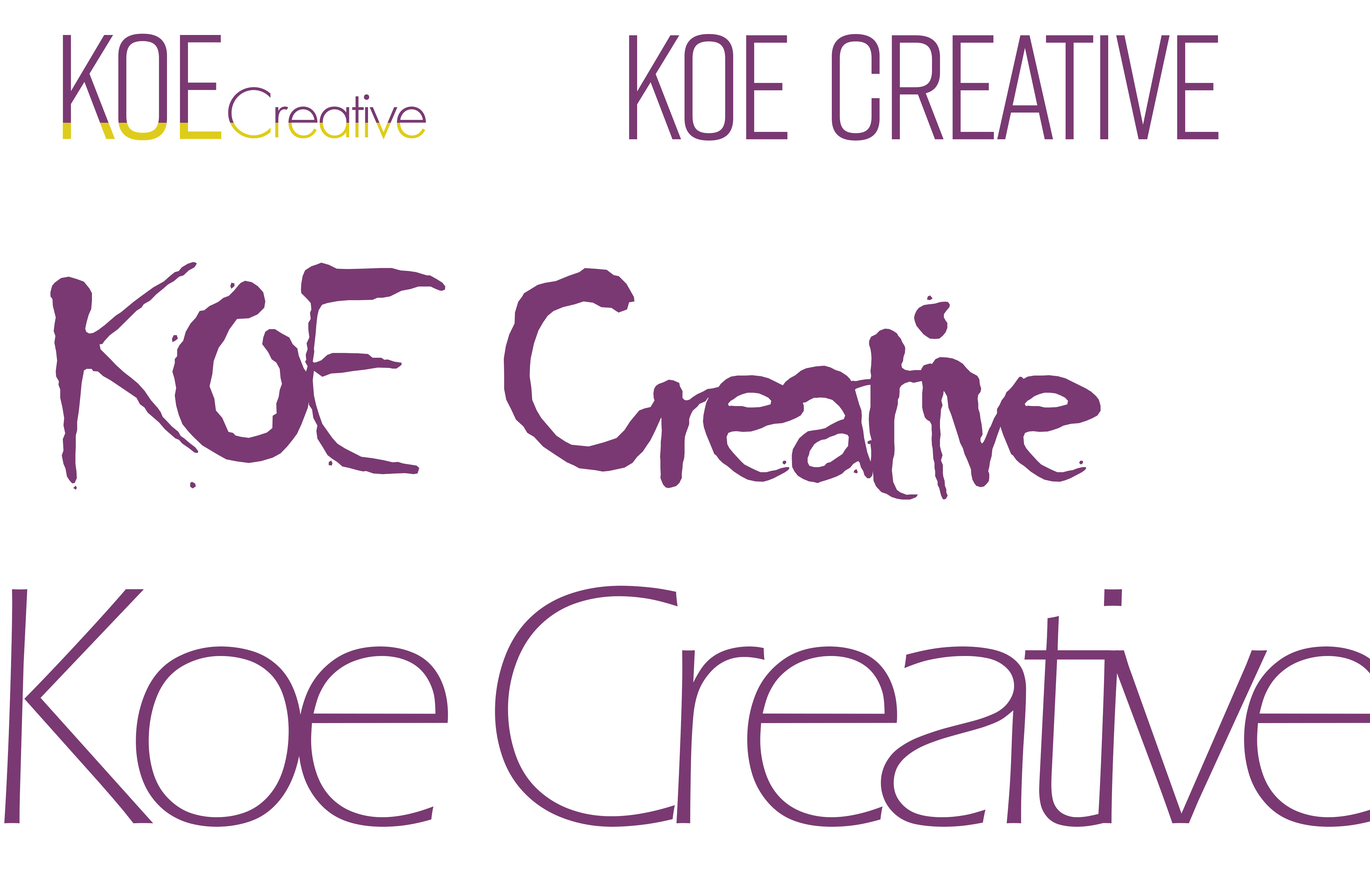
<style>
.page{position:relative;width:1370px;height:870px;background:#ffffff}
.page>*{position:absolute;margin:0}
.t1{font:148.4px "Rift-Regular";letter-spacing:-0.04em;color:#7a3973}
.t2{font:74.2px "FuturaPT-Light";letter-spacing:-0.06em;color:#7a3973}
.t3{font:351.2px "Chiller-Regular";letter-spacing:-0.1em;color:#7a3973}
</style>
<div class="page">
<p class="t1" style="left:63px;top:34px;width:158px;height:106px">Koe</p>
<p class="t1" style="left:629px;top:34px;width:590px;height:107px">Koe  Creative</p>
<p class="t2" style="left:228px;top:87px;width:198px;height:52px">Creative</p>
<p class="t3" style="left:50px;top:262px;width:395px;height:228px">KOE</p>
<p class="t3" style="left:504px;top:268px;width:597px;height:232px">Creative</p>
</div>
